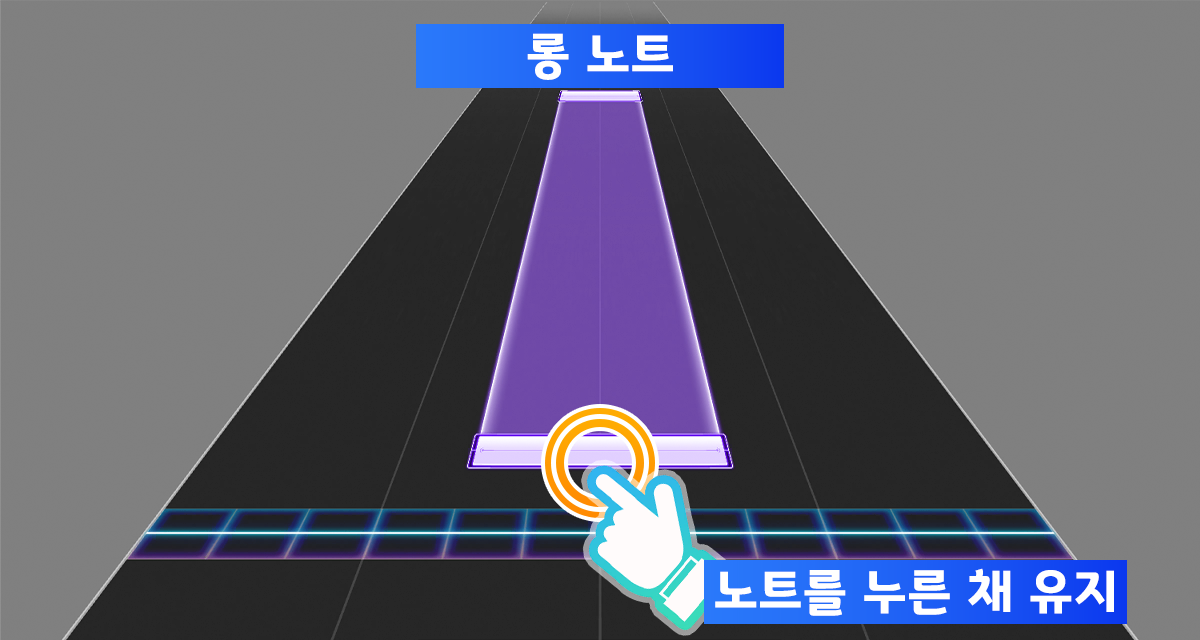
<style>
.page{position:relative;width:1200px;height:640px;background:#808080}
.page>*{position:absolute;margin:0}
.t1{font:50.7px "GyeonggiTitleB";letter-spacing:0.03em;color:#ffffff}
</style>
<div class="page">
<p class="t1" style="left:527px;top:33px;width:146px;height:47px">롱 노트</p>
<p class="t1" style="left:715px;top:568px;width:399px;height:48px">노트를 누른 채 유지</p>
</div>
